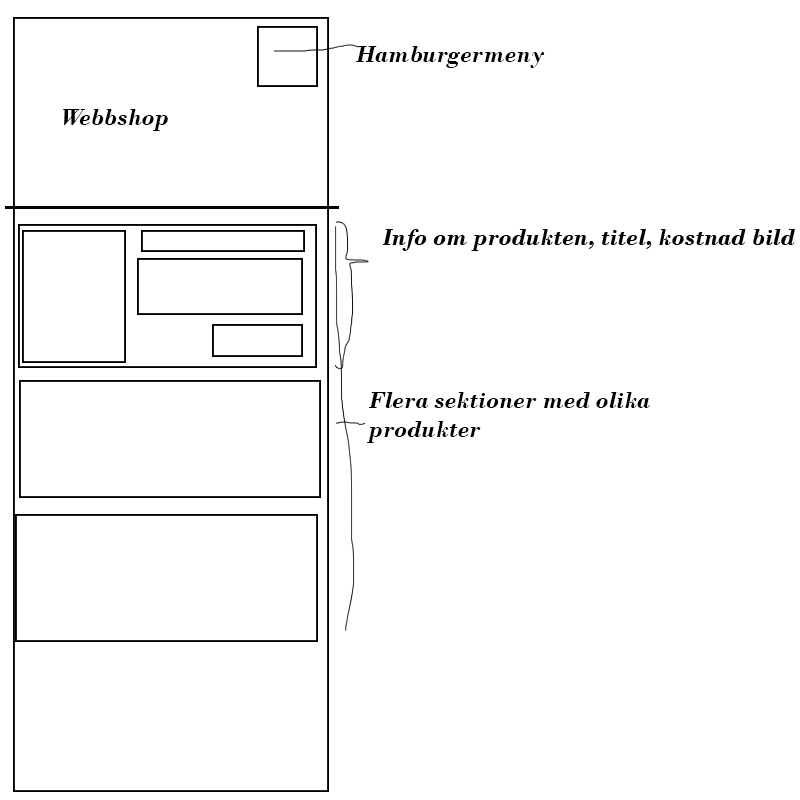
<style>
.page{position:relative;width:800px;height:800px;background:#ffffff}
.page>*{position:absolute;margin:0}
.t1{font:24px "BodoniMT-BoldItalic";color:#000000}
</style>
<div class="page">
<p class="t1" style="left:356px;top:46px;width:189px;height:22px">Hamburgermeny</p>
<p class="t1" style="left:63px;top:109px;width:105px;height:22px">Webbshop</p>
<p class="t1" style="left:367px;top:392px;width:283px;height:51px">Flera sektioner med olika<br>produkter</p>
</div>
